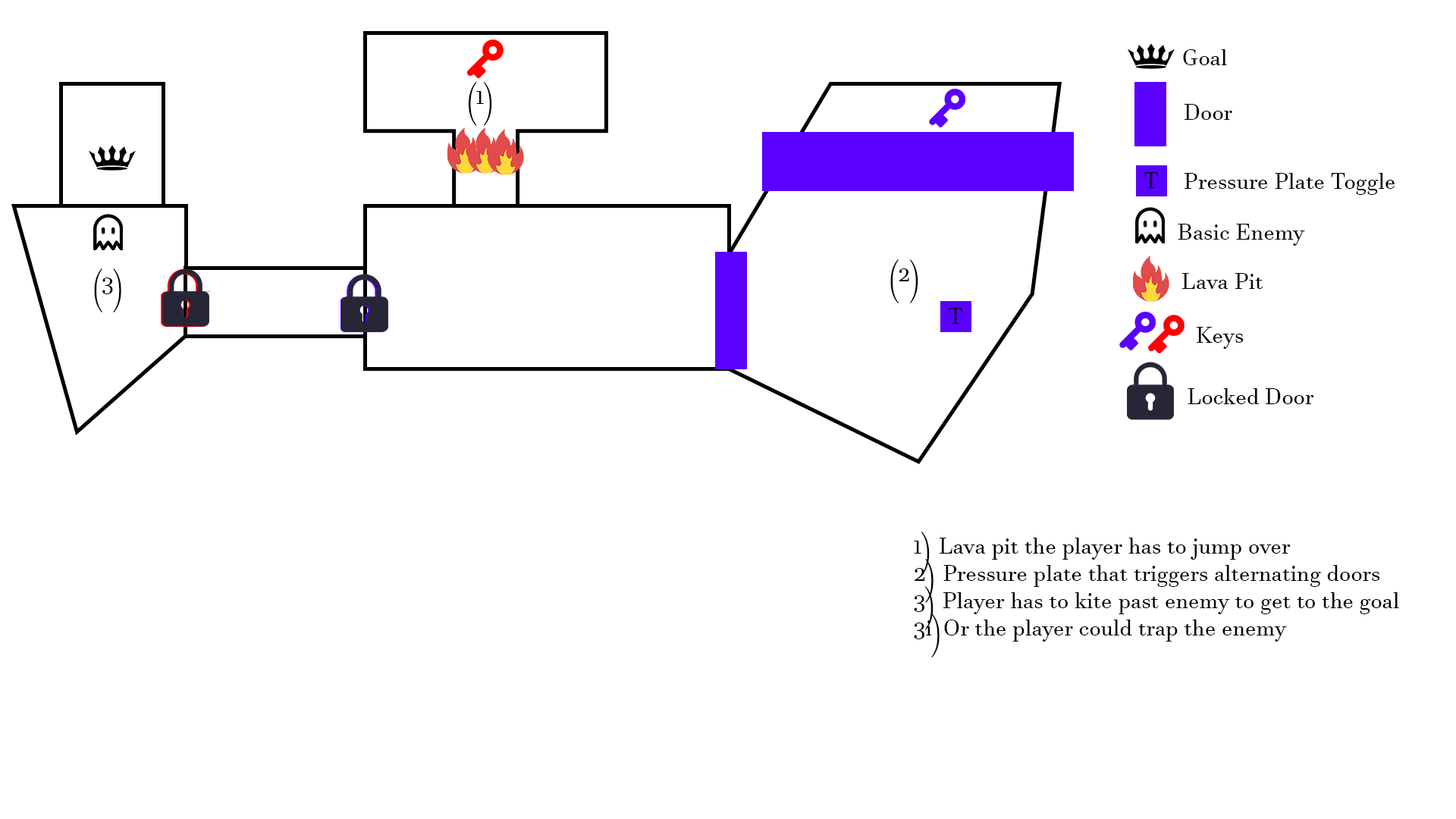
<style>
.page{position:relative;width:1456px;height:819px;background:#ffffff}
.page>*{position:absolute;margin:0}
.t1{font:22.7px "JavaneseText";color:#000000}
</style>
<div class="page">
<p class="t1" style="left:1183px;top:49px;width:44px;height:16px">Goal</p>
<p class="t1" style="left:469px;top:82px;width:23px;height:44px">(1)</p>
<p class="t1" style="left:1185px;top:104px;width:47px;height:16px">Door</p>
<p class="t1" style="left:1185px;top:173px;width:210px;height:22px">Pressure Plate Toggle</p>
<p class="t1" style="left:1178px;top:224px;width:127px;height:22px">Basic Enemy</p>
<p class="t1" style="left:94px;top:268px;width:27px;height:44px">(3)</p>
<p class="t1" style="left:890px;top:259px;width:28px;height:44px">(2)</p>
<p class="t1" style="left:1182px;top:273px;width:81px;height:16px">Lava Pit</p>
<p class="t1" style="left:1197px;top:327px;width:47px;height:22px">Keys</p>
<p class="t1" style="left:1188px;top:388px;width:126px;height:16px">Locked Door</p>
<p class="t1" style="left:914px;top:532px;width:485px;height:125px">1) Lava pit the player has to jump over<br>2) Pressure plate that triggers alternating doors<br>3) Player has to kite past enemy to get to the goal<br>3i)Or the player could trap the enemy</p>
</div>
